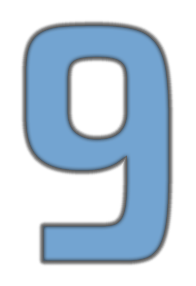
<style>
.page{position:relative;width:196px;height:286px;background:#ffffff}
.page>*{position:absolute;margin:0}
.t1{font:300px "76London";color:#73a4d1}
</style>
<div class="page">
<p class="t1" style="left:26px;top:25px;width:143px;height:236px">9</p>
</div>
